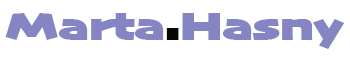
<style>
.page{position:relative;width:350px;height:60px;background:#ffffff}
.page>*{position:absolute;margin:0}
.t1{font:41.7px "Skia-BlackExtended";color:#8685c4}
.t2{font:41.7px "Skia-BlackExtended";color:#060606}
</style>
<div class="page">
<p class="t1" style="left:5px;top:13px;width:339px;height:36px">Marta<span class="t2">.</span>Hasny</p>
</div>
